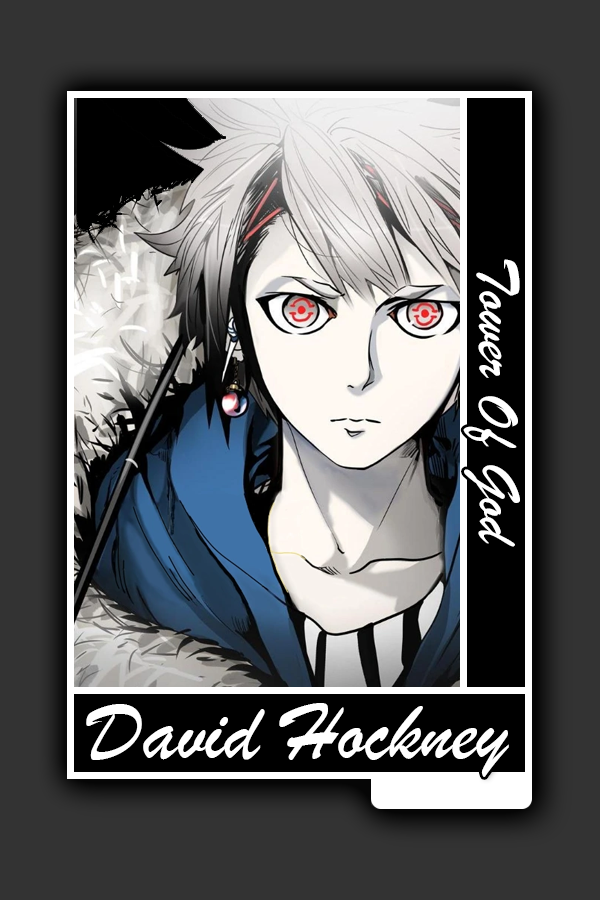
<style>
.page{position:relative;width:600px;height:900px;background:#333333}
.page>*{position:absolute;margin:0}
.t1{font:61.5px "BrushScriptMT";color:#ffffff}
.t2{font:84.8px "BrushScriptMT";color:#ffffff}
</style>
<div class="page">
<p class="t1" style="left:463px;top:259px;width:57px;height:288px;rotate:90deg">Tower Of God</p>
<p class="t2" style="left:86px;top:703px;width:423px;height:74px">David Hockney</p>
</div>
